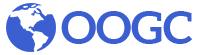
<style>
.page{position:relative;width:200px;height:55px;background:#ffffff}
.page>*{position:absolute;margin:0}
.t1{font:46px "Aleo-Bold";color:#3b5fd1}
</style>
<div class="page">
<p class="t1" style="left:61px;top:11px;width:132px;height:33px">OOGC</p>
</div>
